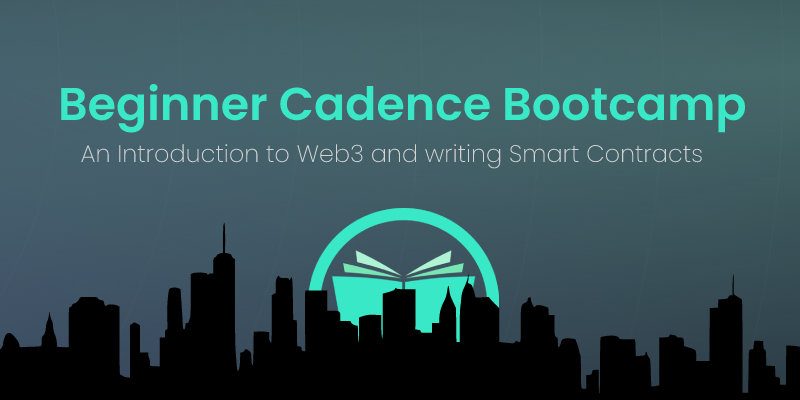
<style>
.page{position:relative;width:800px;height:400px}
.page>*{position:absolute;margin:0}
.t1{font:46px "Poppins-SemiBold";color:#38e8c6}
.t2{font:24px "Poppins-ExtraLight";color:#d4d4d4}
</style>
<div class="page">
<p class="t1" style="left:61px;top:83px;width:685px;height:50px">Beginner Cadence Bootcamp</p>
<p class="t2" style="left:81px;top:144px;width:621px;height:25px">An Introduction to Web3 and writing Smart Contracts</p>
</div>
